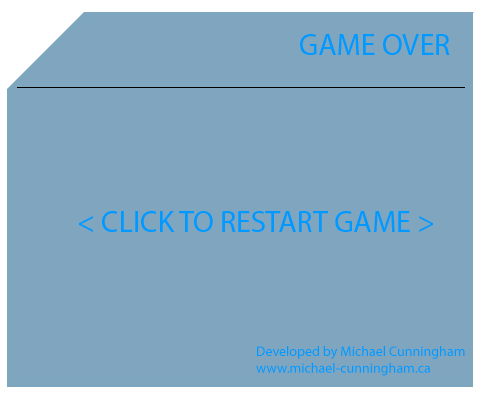
<style>
.page{position:relative;width:485px;height:400px;background:#7fa5bf}
.page>*{position:absolute;margin:0}
.t1{font:30px "MyriadPro-Regular";color:#0099ff}
.t2{font:14px "MyriadPro-Regular";color:#0099ff}
</style>
<div class="page">
<p class="t1" style="left:300px;top:34px;width:150px;height:21px">GAME OVER</p>
<p class="t1" style="left:79px;top:211px;width:354px;height:21px">&lt; CLICK TO RESTART GAME &gt;</p>
<p class="t2" style="left:256px;top:346px;width:209px;height:30px">Developed by Michael Cunningham<br>www.michael-cunningham.ca</p>
</div>
